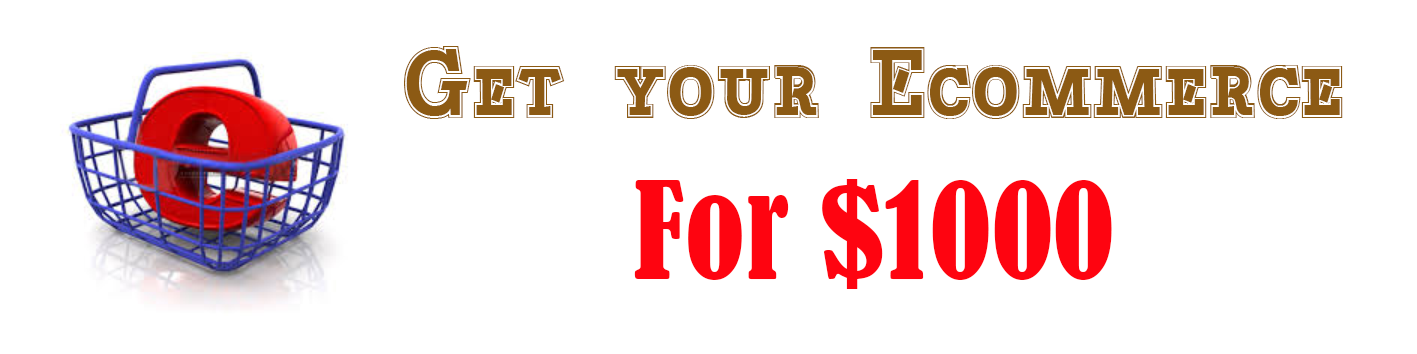
<style>
.page{position:relative;width:1417px;height:354px;background:#ffffff}
.page>*{position:absolute;margin:0}
.t1{font:104px "Bascula-College";color:#8c5a14;scale:0.93 1}
.t2{font:125px "BernardMT-Condensed";color:#fe0410}
</style>
<div class="page">
<p class="t1" style="left:404px;top:46px;width:939px;height:73px">Get your Ecommerce</p>
<p class="t2" style="left:634px;top:179px;width:478px;height:110px">For $1000</p>
</div>
